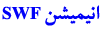
<style>
.page{position:relative;width:100px;height:30px;background:#ffffff}
.page>*{position:absolute;margin:0}
.t1{font:23px "BLotusBold";color:#0000f8}
.t2{font:18px "TimesNewRomanPS-BoldMT";color:#0000f8}
</style>
<div class="page">
<p class="t1" style="left:2px;top:5px;width:98px;height:21px">انیمیشن <span class="t2">SWF</span></p>
</div>
